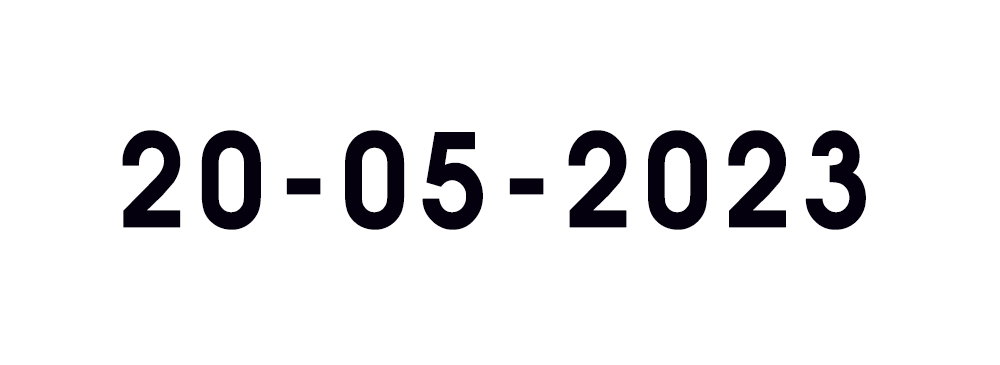
<style>
.page{position:relative;width:1000px;height:365px;background:#ffffff}
.page>*{position:absolute;margin:0}
.t1{font:141.7px "Ancuu-Bold";letter-spacing:0.075em;color:#04000d;text-transform:uppercase;font-weight:bold;scale:0.92 1}
</style>
<div class="page">
<p class="t1" style="left:122px;top:130px;width:744px;height:100px">20-05-2023</p>
</div>
